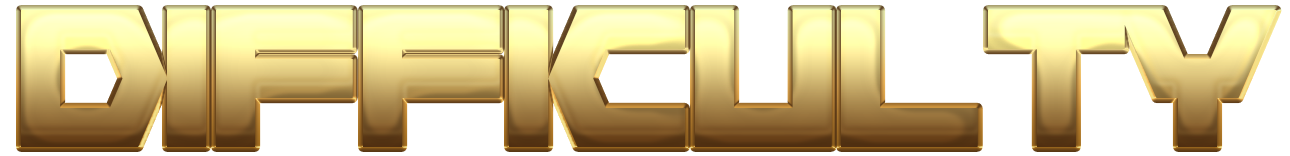
<style>
.page{position:relative;width:1290px;height:156px;background:#ffffff}
.page>*{position:absolute;margin:0}
.t1{font:200px "Diagon"}
</style>
<div class="page">
<p class="t1" style="left:21px;top:10px;width:1256px;height:137px">DIFFICULTY</p>
</div>
